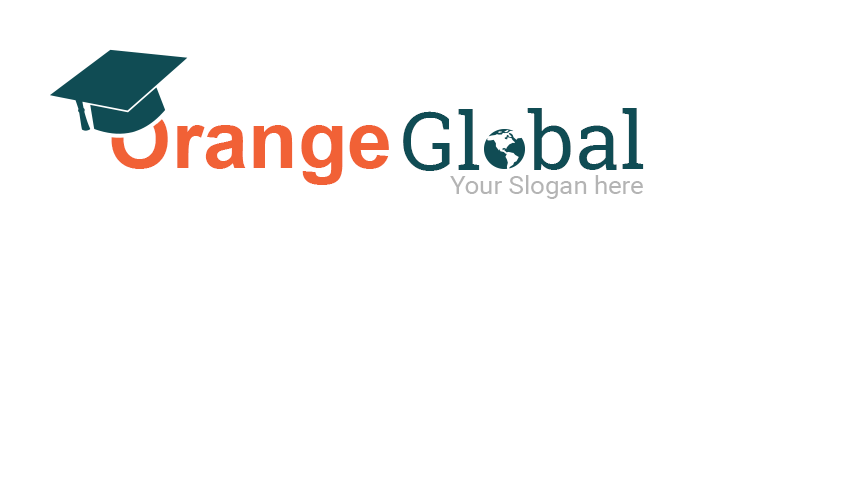
<style>
.page{position:relative;width:868px;height:500px;background:#ffffff}
.page>*{position:absolute;margin:0}
.t1{font:79.8px "Arial-BoldMT";color:#f16136}
.t2{font:79.8px "RobotoSlab-Regular";color:#104c54}
.t3{font:25.3px "Roboto-Regular";color:#b4b4b4}
</style>
<div class="page">
<p class="t1" style="left:111px;top:109px;width:278px;height:76px">Orange</p>
<p class="t2" style="left:403px;top:109px;width:77px;height:62px">Gl</p>
<p class="t2" style="left:527px;top:108px;width:117px;height:62px">bal</p>
<p class="t3" style="left:450px;top:175px;width:193px;height:24px">Your Slogan here</p>
</div>
